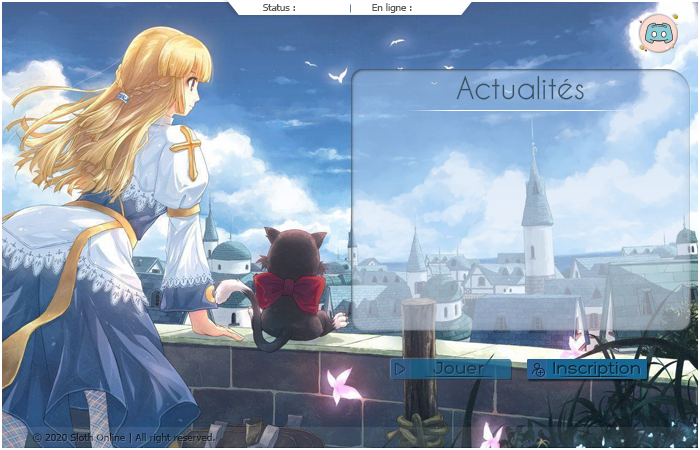
<style>
.page{position:relative;width:700px;height:450px}
.page>*{position:absolute;margin:0}
.t1{font:9.7px "Tahoma";color:#595959}
.t2{font:29.2px "CaviarDreams";color:#3c4f5f}
.t3{font:18px "Hero-Regular";color:#193346}
.t4{font:18px "Hero-Regular";color:#0a2c3f}
.t5{font:10px "Tahoma";letter-spacing:0.01em;color:#19242f}
</style>
<div class="page">
<p class="t1" style="left:263px;top:4px;width:32px;height:7px">Status :</p>
<p class="t1" style="left:372px;top:3px;width:40px;height:10px">En ligne :</p>
<p class="t2" style="left:456px;top:75px;width:128px;height:25px">Actualités</p>
<p class="t3" style="left:433px;top:362px;width:51px;height:12px">Jouer</p>
<p class="t4" style="left:553px;top:362px;width:87px;height:15px">Inscription</p>
<p class="t5" style="left:32px;top:433px;width:183px;height:10px">© 2020 Sloth Online | All right reserved.</p>
</div>
